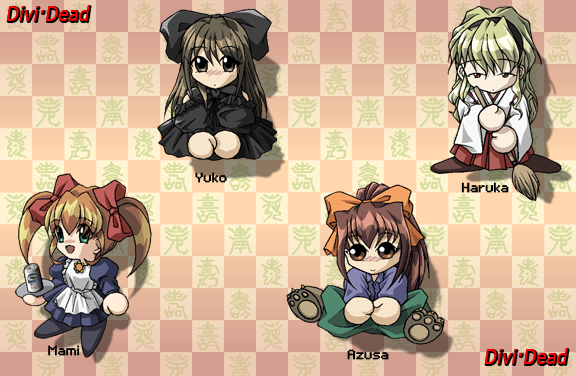
<style>
.page{position:relative;width:576px;height:376px}
.page>*{position:absolute;margin:0}
.t1{font:20px "Tahoma";letter-spacing:0.04em;color:#ff0000;font-style:italic;scale:0.9 1}
.t2{font:12px "Volter(Goldfish)-Regular";color:#000000;font-weight:bold}
</style>
<div class="page">
<p class="t1" style="left:6px;top:5px;width:84px;height:16px">Divi·Dead</p>
<p class="t2" style="left:195px;top:172px;width:32px;height:11px">Yuko</p>
<p class="t2" style="left:461px;top:182px;width:48px;height:11px">Haruka</p>
<p class="t2" style="left:48px;top:345px;width:32px;height:11px">Mami</p>
<p class="t2" style="left:347px;top:349px;width:42px;height:11px">Azusa</p>
<p class="t1" style="left:484px;top:348px;width:84px;height:16px">Divi·Dead</p>
</div>
